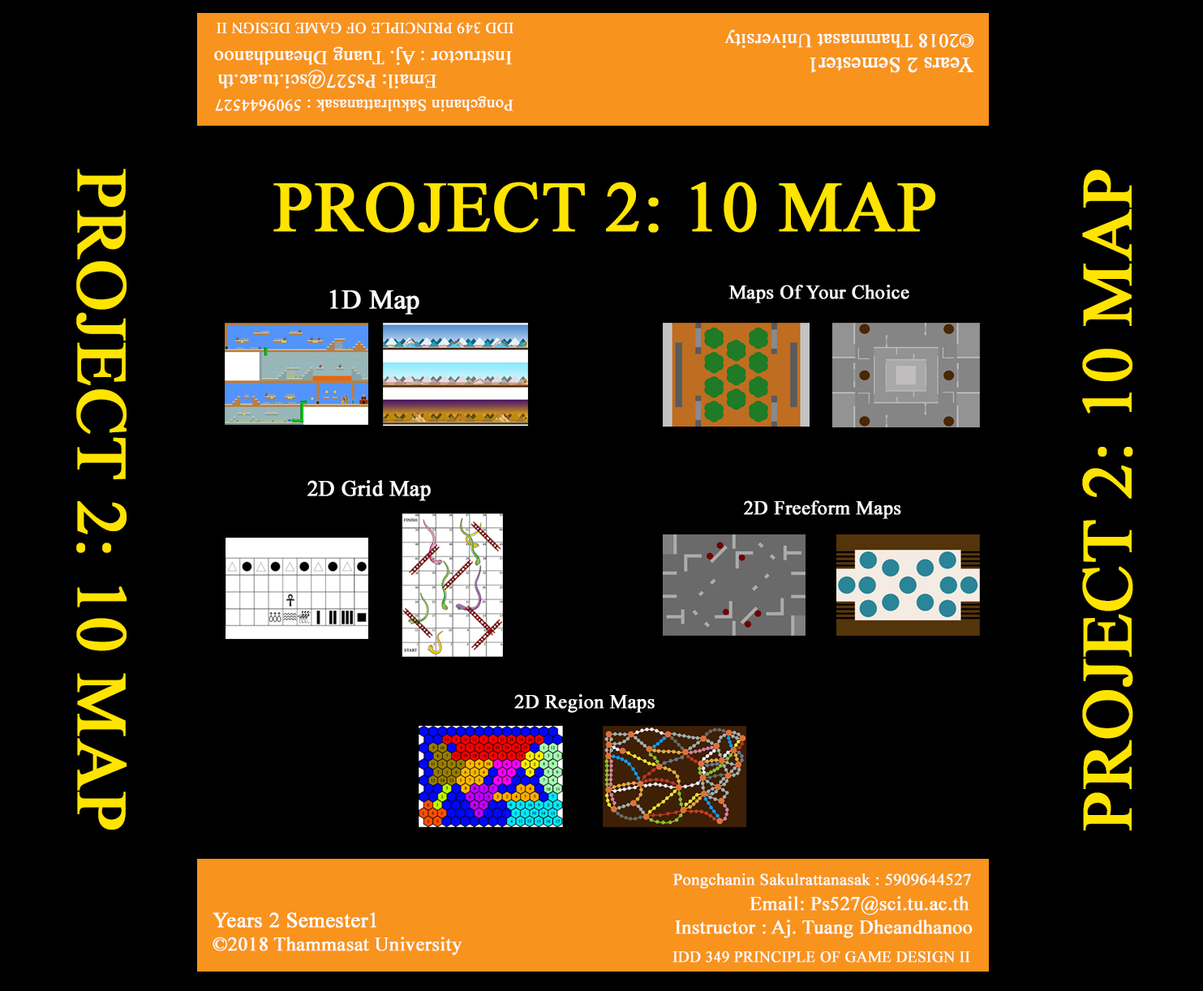
<style>
.page{position:relative;width:1203px;height:991px;background:#000000}
.page>*{position:absolute;margin:0}
.t1{font:15.4px "TimesNewRomanPSMT";color:#fcfaf7;font-weight:bold}
.t2{font:19.5px "TimesNewRomanPSMT";color:#fcfaf7;font-weight:bold}
.t3{font:21.2px "TimesNewRomanPSMT";color:#fcfaf7;font-weight:bold}
.t4{font:16.5px "TimesNewRomanPSMT";color:#fcfaf7;font-weight:bold}
.t5{font:71px "TimesNewRomanPSMT";color:#ffe400;font-weight:bold}
.t6{font:26.8px "TimesNewRomanPSMT";color:#fcfaf7;font-weight:bold}
.t7{font:21.8px "TimesNewRomanPSMT";color:#fcfaf7;font-weight:bold}
</style>
<div class="page">
<p class="t1" style="left:217px;top:22px;width:296px;height:12px;rotate:180deg">IDD 349 PRINCIPLE OF GAME DESIGN II</p>
<p class="t2" style="left:724px;top:29px;width:250px;height:19px;rotate:180deg">©2018 Thammasat University</p>
<p class="t2" style="left:214px;top:46px;width:298px;height:19px;rotate:180deg">Instructor : Aj. Tuang Dheandhanoo</p>
<p class="t3" style="left:810px;top:57px;width:164px;height:16px;rotate:180deg">Years 2 Semester1</p>
<p class="t2" style="left:217px;top:70px;width:220px;height:18px;rotate:180deg">Email: Ps527@sci.tu.ac.th</p>
<p class="t4" style="left:215px;top:96px;width:298px;height:16px;rotate:180deg">Pongchanin Sakulrattanasak : 5909644527</p>
<p class="t5" style="left:76px;top:169px;width:51px;height:661px;rotate:90deg">PROJECT 2: 10 MAP</p>
<p class="t5" style="left:1082px;top:170px;width:51px;height:661px;rotate:-90deg">PROJECT 2: 10 MAP</p>
<p class="t5" style="left:273px;top:182px;width:662px;height:51px">PROJECT 2: 10 MAP</p>
<p class="t6" style="left:329px;top:290px;width:90px;height:25px">1D Map</p>
<p class="t2" style="left:728px;top:285px;width:181px;height:18px">Maps Of Your Choice</p>
<p class="t7" style="left:307px;top:480px;width:124px;height:21px">2D Grid Map</p>
<p class="t2" style="left:744px;top:500px;width:157px;height:19px">2D Freeform Maps</p>
<p class="t2" style="left:514px;top:694px;width:141px;height:19px">2D Region Maps</p>
<p class="t4" style="left:672px;top:874px;width:299px;height:15px">Pongchanin Sakulrattanasak : 5909644527</p>
<p class="t2" style="left:750px;top:896px;width:219px;height:19px">Email: Ps527@sci.tu.ac.th</p>
<p class="t3" style="left:213px;top:913px;width:163px;height:15px">Years 2 Semester1</p>
<p class="t2" style="left:675px;top:920px;width:298px;height:19px">Instructor : Aj. Tuang Dheandhanoo</p>
<p class="t2" style="left:213px;top:937px;width:249px;height:19px">©2018 Thammasat University</p>
<p class="t1" style="left:672px;top:951px;width:298px;height:12px">IDD 349 PRINCIPLE OF GAME DESIGN II</p>
</div>
